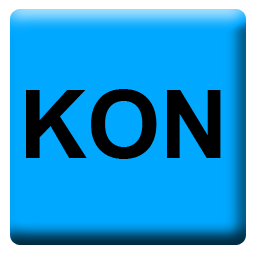
<style>
.page{position:relative;width:256px;height:256px;background:#00a8ff}
.page>*{position:absolute;margin:0}
.t1{font:94px "Arial-BoldMT";color:#000000}
</style>
<div class="page">
<p class="t1" style="left:26px;top:89px;width:195px;height:70px">KON</p>
</div>
